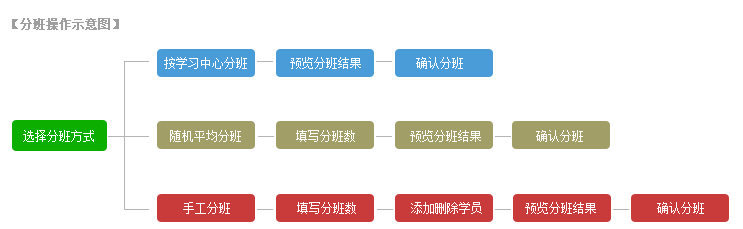
<style>
.page{position:relative;width:743px;height:229px;background:#ffffff}
.page>*{position:absolute;margin:0}
.t1{font:12px "SimSun";color:#9e9e9e;font-weight:bold}
.t2{font:12px "NSimSun";color:#ffffff}
.t3{font:12px "NSimSun";color:#fefefe}
</style>
<div class="page">
<p class="t1" style="left:12px;top:18px;width:107px;height:12px">【分班操作示意图】</p>
<p class="t2" style="left:164px;top:57px;width:299px;height:12px">按学习中心分班       预览分班结果         确认分班</p>
<p class="t2" style="left:23px;top:130px;width:71px;height:12px">选择分班方式</p>
<p class="t3" style="left:170px;top:130px;width:413px;height:12px">随机平均分班         填写分班数         预览分班结果         确认分班</p>
<p class="t2" style="left:183px;top:202px;width:521px;height:12px">手工分班           填写分班数         添加删除学员       预览分班结果          确认分班</p>
</div>
